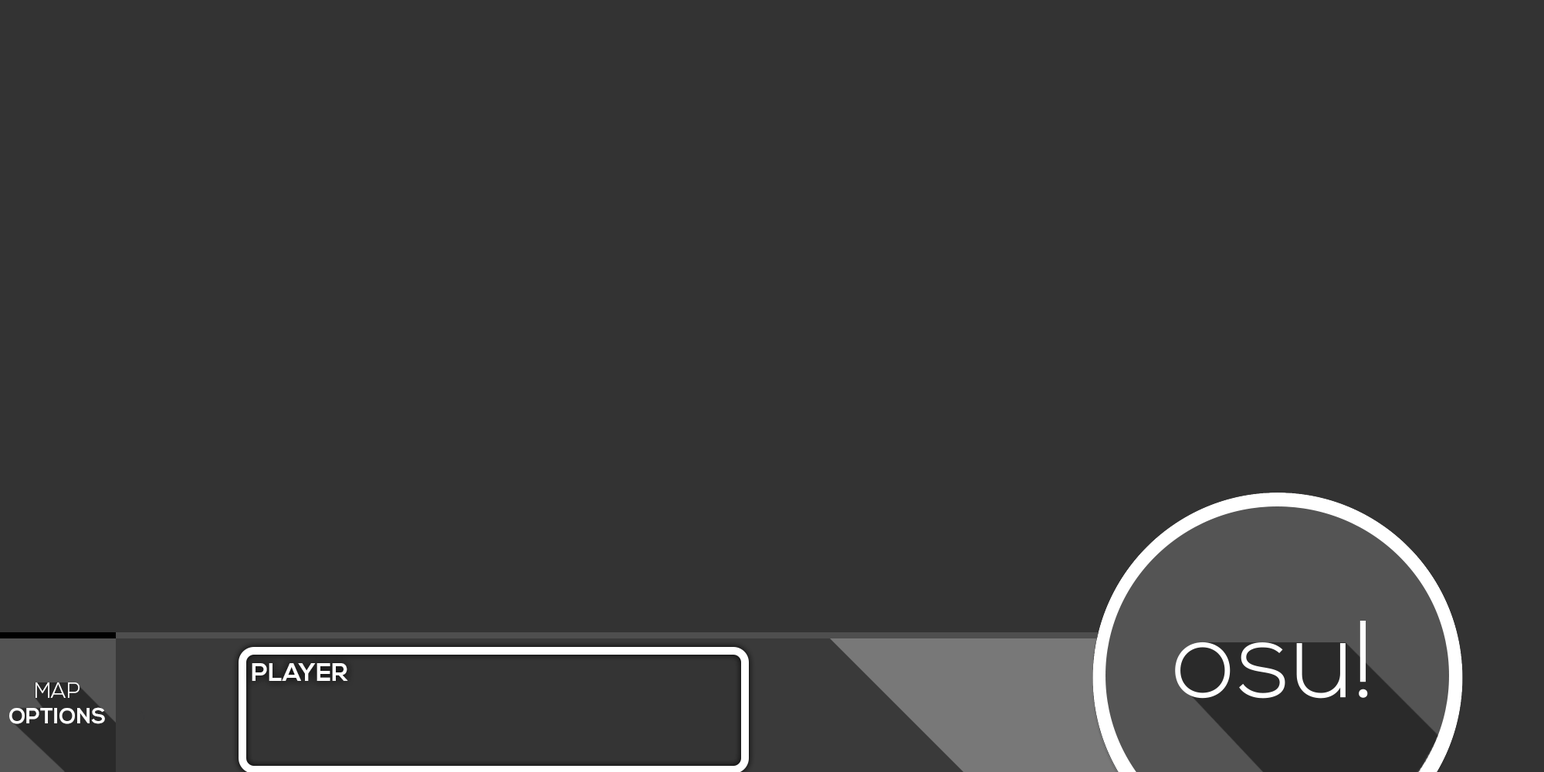
<style>
.page{position:relative;width:1544px;height:772px;background:#333333}
.page>*{position:absolute;margin:0}
.t1{font:24.8px "NexaBold";color:#ffffff}
.t2{font:21.6px "NexaBold";color:#ffffff}
.t3{font:21.6px "NexaLight";color:#ffffff}
</style>
<div class="page">
<p class="t1" style="left:252px;top:663px;width:96px;height:18px">PLAYER</p>
<p class="t2" style="left:9px;top:683px;width:96px;height:41px;text-align:center"><span class="t3">MAP<br></span>OPTIONS</p>
</div>
